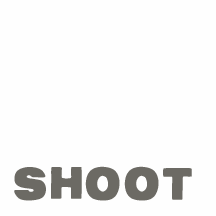
<style>
.page{position:relative;width:216px;height:216px;background:#fefefe}
.page>*{position:absolute;margin:0}
.t1{font:36px "AZPostcard";color:#6c6a64;font-weight:bold}
</style>
<div class="page">
<p class="t1" style="left:14px;top:166px;width:178px;height:35px">SHOOT</p>
</div>
